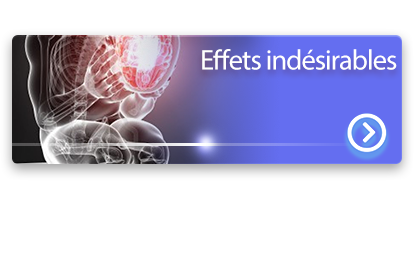
<style>
.page{position:relative;width:415px;height:272px;background:#ffffff}
.page>*{position:absolute;margin:0}
.t1{font:28.5px "MyriadPro-Regular";letter-spacing:-0.034em;color:#ffffff}
</style>
<div class="page">
<p class="t1" style="left:202px;top:49px;width:195px;height:21px">Effets indésirables</p>
</div>
